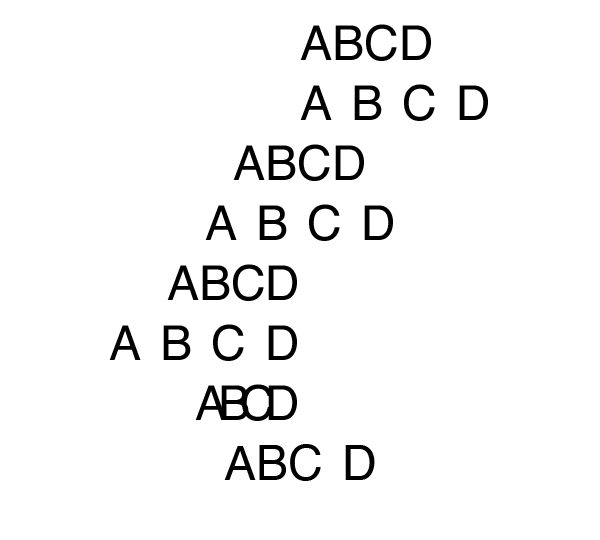
<style>
.page{position:relative;width:600px;height:540px;background:#ffffff}
.page>*{position:absolute;margin:0}
.t1{font:48px "Helvetica";color:#000000}
.t2{font:48px "Helvetica";letter-spacing:0.4em;color:#000000}
.t3{font:48px "Helvetica";letter-spacing:-0.2em;color:#000000}
</style>
<div class="page">
<p class="t1" style="left:300px;top:24px;width:131px;height:37px">ABCD</p>
<p class="t2" style="left:300px;top:84px;width:188px;height:37px">ABCD</p>
<p class="t1" style="left:233px;top:144px;width:131px;height:37px">ABCD</p>
<p class="t2" style="left:205px;top:204px;width:188px;height:37px">ABCD</p>
<p class="t1" style="left:167px;top:264px;width:130px;height:37px">ABCD</p>
<p class="t2" style="left:109px;top:324px;width:188px;height:37px">ABCD</p>
<p class="t3" style="left:195px;top:384px;width:102px;height:37px">ABCD</p>
<p class="t1" style="left:224px;top:444px;width:151px;height:37px">AB<span class="t2">CD</span></p>
</div>
